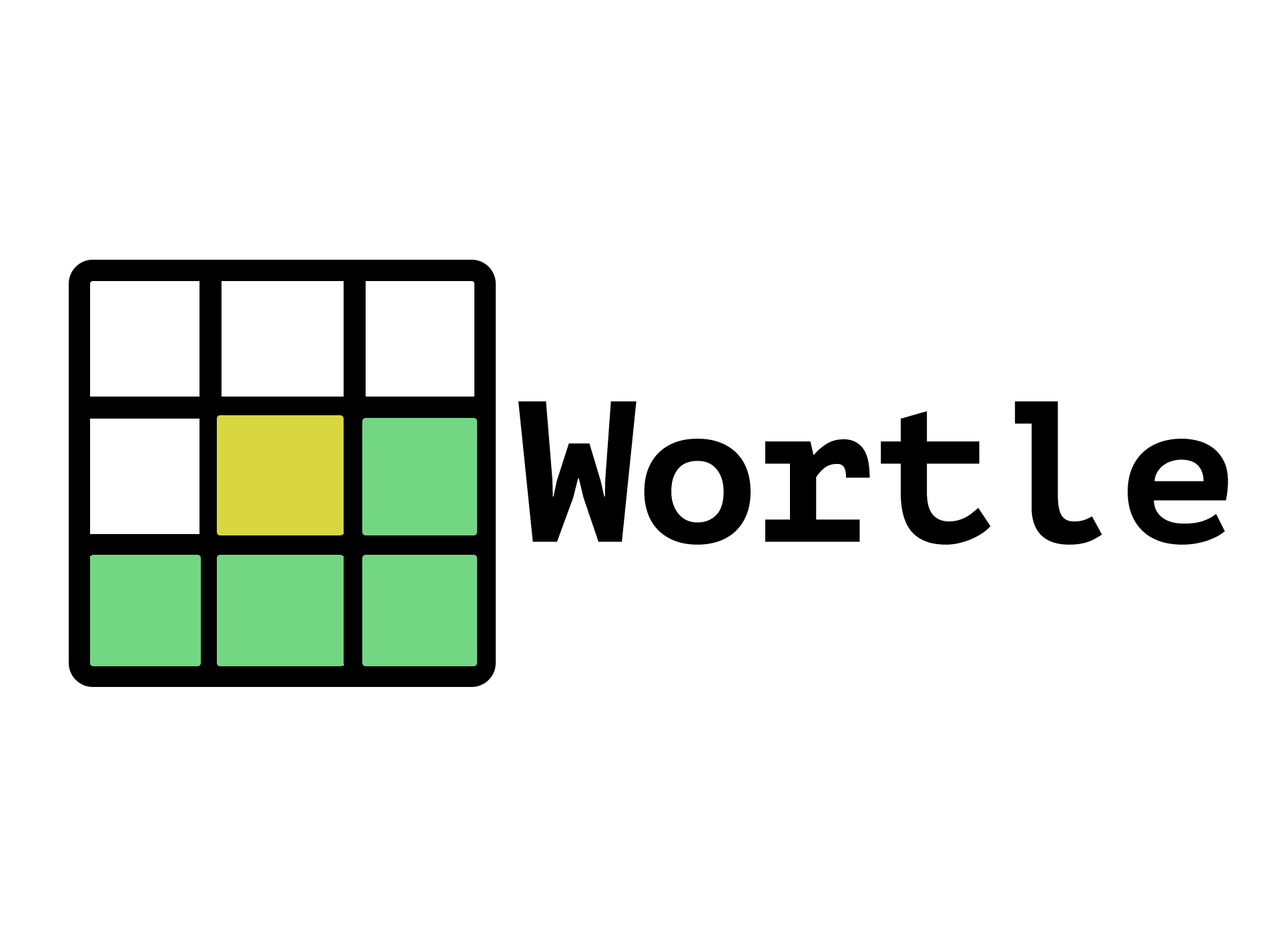
<style>
.page{position:relative;width:1261px;height:946px;background:#ffffff}
.page>*{position:absolute;margin:0}
.t1{font:200.2px "PTMono-Bold";color:#000000}
</style>
<div class="page">
<p class="t1" style="left:518px;top:401px;width:710px;height:143px">Wortle</p>
</div>
